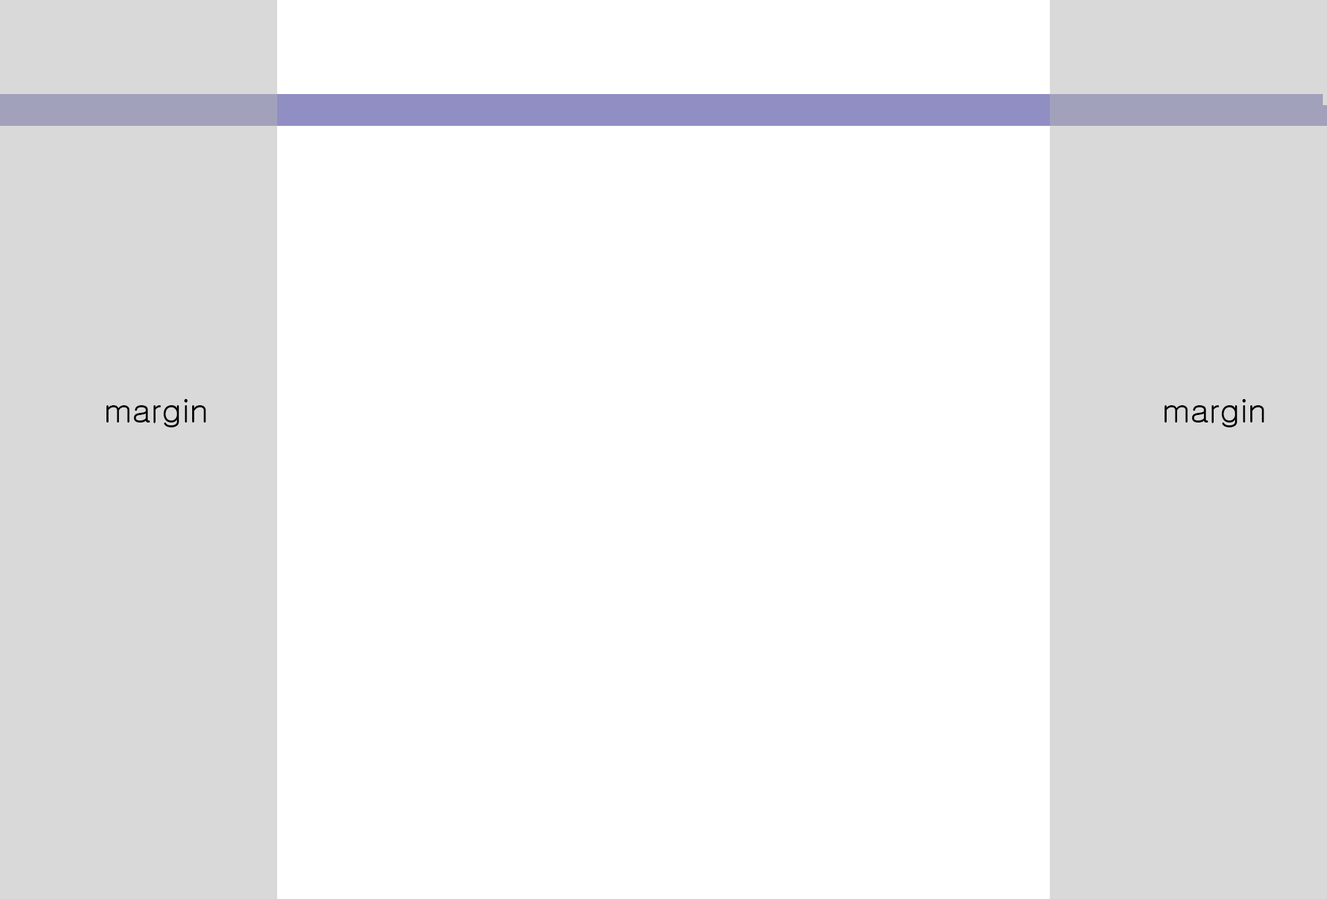
<style>
.page{position:relative;width:1327px;height:899px;background:#ffffff}
.page>*{position:absolute;margin:0}
.t1{font:33.2px "Gulim";color:#000000}
</style>
<div class="page">
<p class="t1" style="left:106px;top:399px;width:100px;height:28px">margin</p>
<p class="t1" style="left:1165px;top:399px;width:99px;height:28px">margin</p>
</div>
